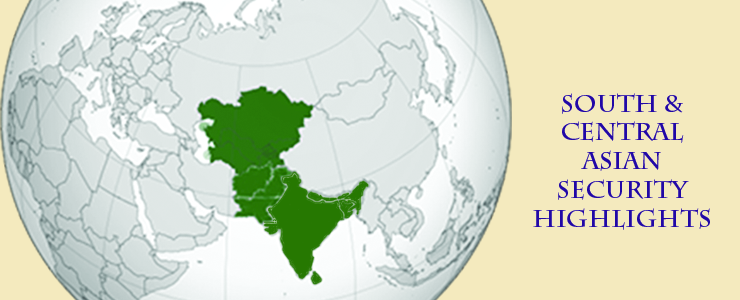
<style>
.page{position:relative;width:740px;height:300px;background:#f4eabe}
.page>*{position:absolute;margin:0}
.t1{font:24px "CharlemagneStd-Bold";color:#2108a6}
</style>
<div class="page">
<p class="t1" style="left:533px;top:93px;width:177px;height:137px;text-align:center">South &amp; <br>Central <br>Asian <br>Security Highlights</p>
</div>
